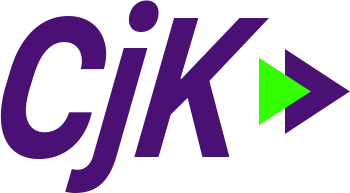
<style>
.page{position:relative;width:350px;height:193px;background:#ffffff}
.page>*{position:absolute;margin:0}
.t1{font:210.3px "SanFranciscoText-BoldItalic";letter-spacing:-0.05em;color:#4a1073;font-style:italic;scale:0.81 1}
</style>
<div class="page">
<p class="t1" style="left:0px;top:0px;width:269px;height:193px">CjK</p>
</div>
